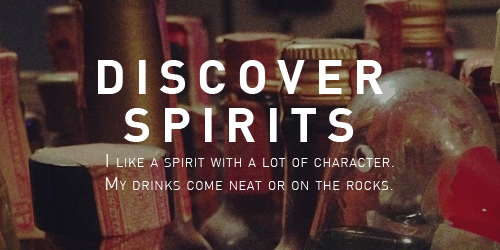
<style>
.page{position:relative;width:500px;height:250px}
.page>*{position:absolute;margin:0}
.t1{font:48px/2.5px "DIN-Bold";letter-spacing:0.2em;color:#ffffff;text-transform:uppercase}
.t2{font:18px "DIN-Light";letter-spacing:0.05em;color:#ffffff;font-variant:small-caps}
</style>
<div class="page">
<p class="t1" style="left:98px;top:60px;width:285px;height:82px;text-align:center">Discover<br>Spirits</p>
<p class="t2" style="left:106px;top:154px;width:288px;height:13px">I like a spirit with a lot of character.</p>
<p class="t2" style="left:106px;top:177px;width:287px;height:13px">My drinks come neat or on the rocks.</p>
</div>
